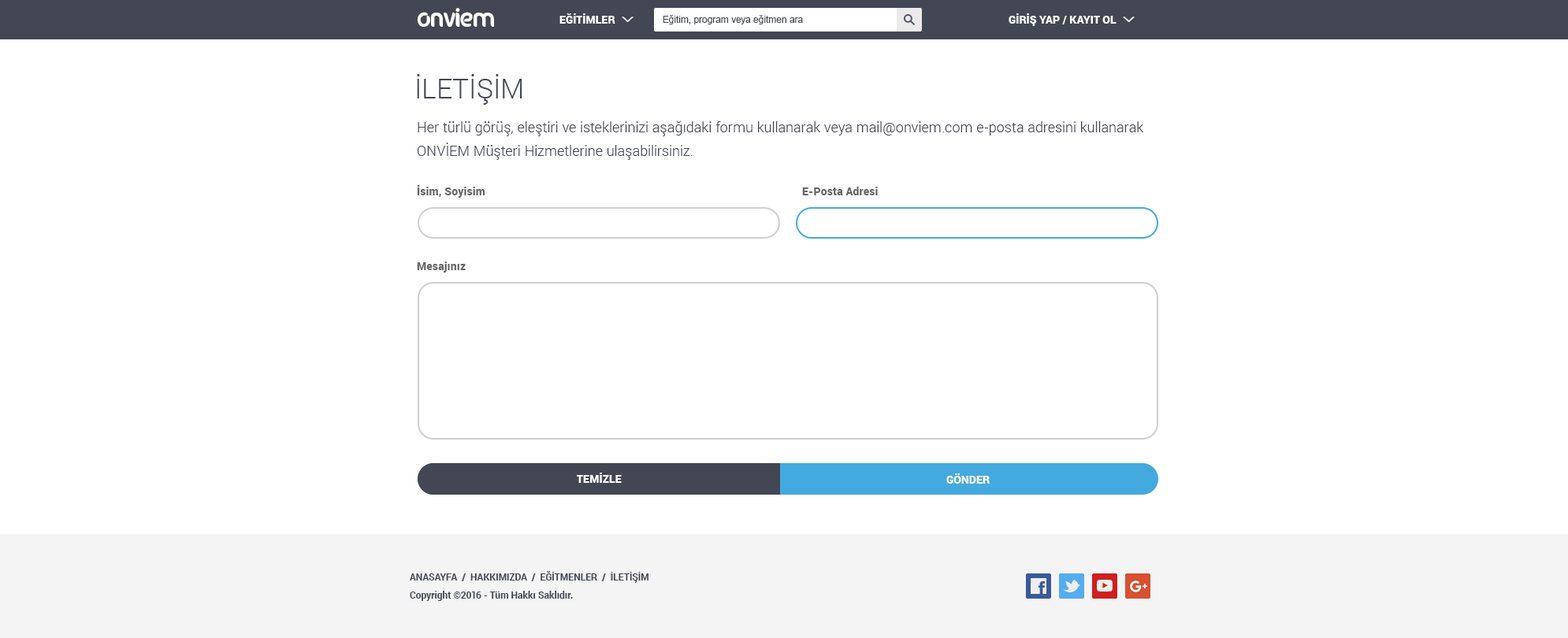
<style>
.page{position:relative;width:1568px;height:638px;background:#ffffff}
.page>*{position:absolute;margin:0}
.t1{font:27.6px "Roboto-Light";color:#434753}
.t2{font:14.2px/23.6px "Roboto-Light";letter-spacing:0.01em;color:#434753}
.t3{font:11px "Roboto-Black";letter-spacing:0.01em;color:#666666}
.t4{font:11px "Roboto-Black";letter-spacing:0.01em;color:#ffffff}
.t5{font:11px "Roboto-Black";color:#ffffff}
</style>
<div class="page">
<p class="t1" style="left:417px;top:74px;width:105px;height:31px">İLETİŞİM</p>
<p class="t2" style="left:418px;top:121px;width:726px;height:39px">Her türlü görüş, eleştiri ve isteklerinizi aşağıdaki formu kullanarak veya mail@onviem.com e-posta adresini kullanarak ONVİEM Müşteri Hizmetlerine ulaşabilirsiniz.</p>
<p class="t3" style="left:417px;top:185px;width:68px;height:13px">İsim, Soyisim</p>
<p class="t3" style="left:802px;top:187px;width:76px;height:8px">E-Posta Adresi</p>
<p class="t3" style="left:417px;top:262px;width:49px;height:11px">Mesajınız</p>
<p class="t4" style="left:577px;top:473px;width:45px;height:10px">TEMİZLE</p>
<p class="t5" style="left:946px;top:474px;width:44px;height:10px">GÖNDER</p>
</div>
